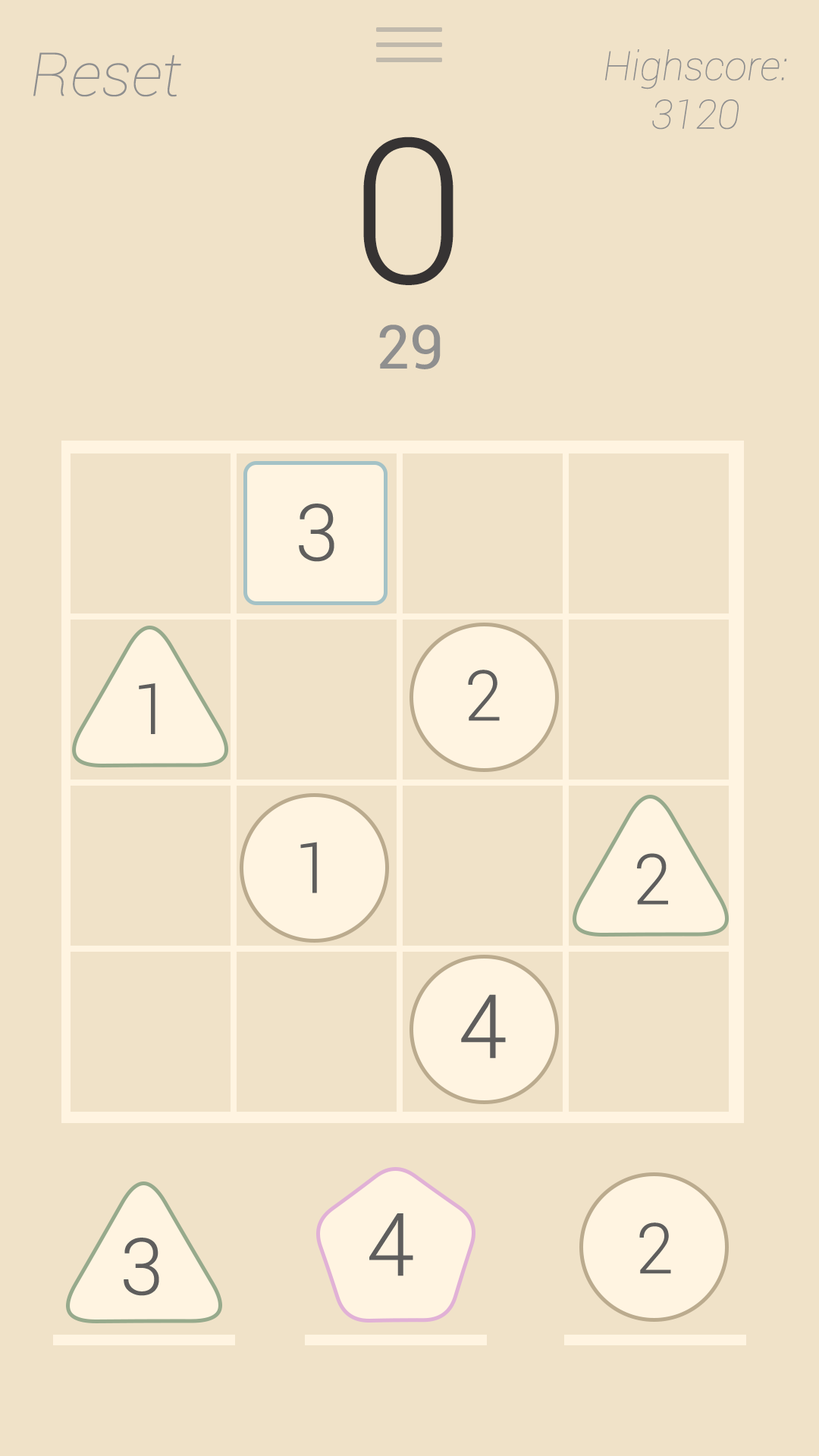
<style>
.page{position:relative;width:819px;height:1456px;background:#f0e2c8}
.page>*{position:absolute;margin:0}
.t1{font:60.7px "Roboto-ThinItalic";color:#8f8f8f}
.t2{font:40.4px "Roboto-ThinItalic";color:#8f8f8f}
.t3{font:202.2px "Roboto-Light";color:#363333}
.t4{font:60.7px "Roboto-Regular";color:#8f8f8f}
.t5{font:78.8px "Roboto-Light";color:#5f5e5d}
.t6{font:70.2px "Roboto-Light";color:#5f5e5d}
.t7{font:88.8px "Roboto-Light";color:#5f5e5d}
.t8{font:87.4px "Roboto-Light";color:#5f5e5d}
</style>
<div class="page">
<p class="t1" style="left:33px;top:52px;width:148px;height:45px">Reset</p>
<p class="t2" style="left:605px;top:49px;width:182px;height:81px;text-align:center">Highscore:<br>3120</p>
<p class="t3" style="left:363px;top:136px;width:90px;height:149px">0</p>
<p class="t4" style="left:379px;top:325px;width:62px;height:44px">29</p>
<p class="t5" style="left:299px;top:504px;width:35px;height:58px">3</p>
<p class="t6" style="left:468px;top:670px;width:32px;height:51px">2</p>
<p class="t6" style="left:139px;top:683px;width:16px;height:51px">1</p>
<p class="t6" style="left:300px;top:842px;width:17px;height:51px">1</p>
<p class="t6" style="left:637px;top:853px;width:31px;height:52px">2</p>
<p class="t7" style="left:461px;top:994px;width:45px;height:65px">4</p>
<p class="t8" style="left:369px;top:1213px;width:44px;height:63px">4</p>
<p class="t6" style="left:639px;top:1222px;width:32px;height:52px">2</p>
<p class="t5" style="left:124px;top:1238px;width:35px;height:58px">3</p>
</div>
